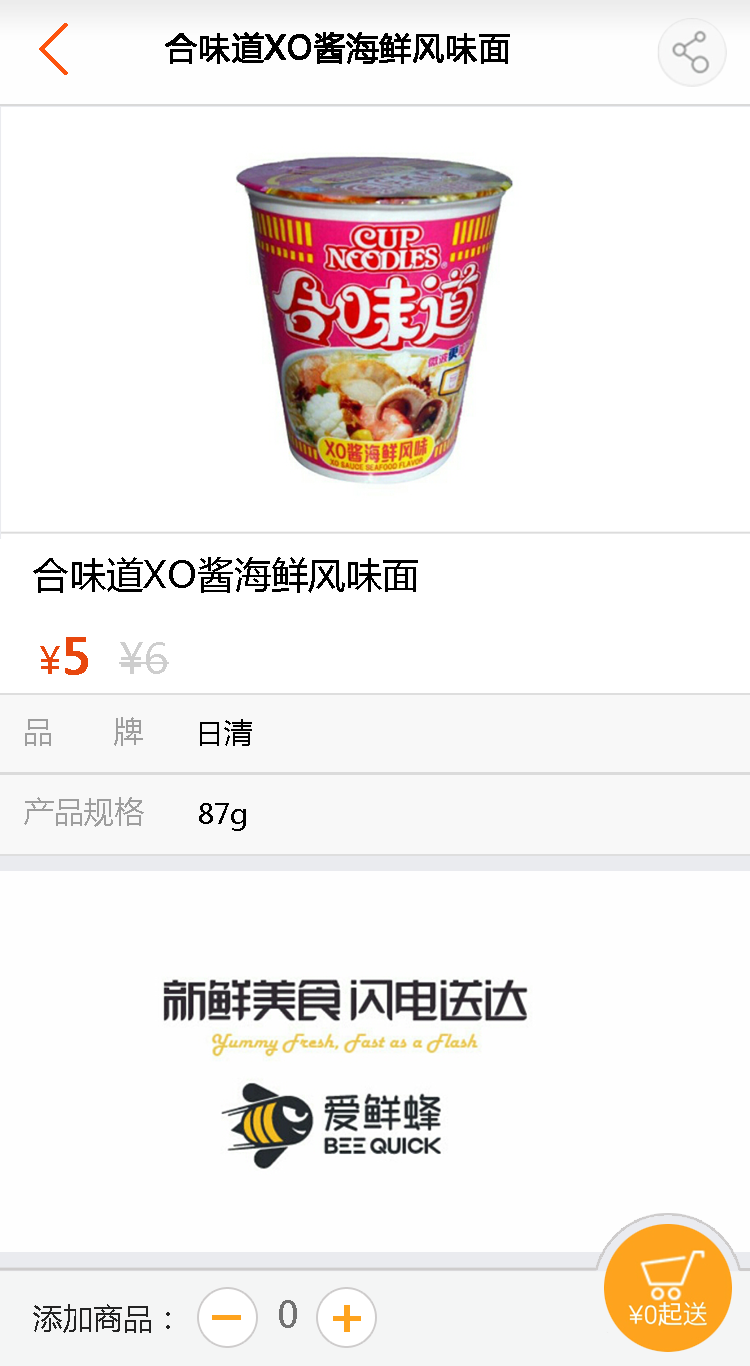
<style>
.page{position:relative;width:750px;height:1366px;background:#ffffff}
.page>*{position:absolute;margin:0}
.t1{font:72px "SimSun";color:#fd540e;font-weight:bold}
.t2{font:32px "MicrosoftYaHei";color:#000000;font-weight:bold}
.t3{font:37px "MicrosoftYaHei";color:#000000}
.t4{font:37px "MicrosoftYaHei";color:#e8470e}
.t5{font:48px "MicrosoftYaHei";color:#e8470e;font-weight:bold}
.t6{font:42px "MicrosoftYaHei";color:#cecece}
.t7{font:30px "MicrosoftYaHei";color:#9e9e9e}
.t8{font:28px "MicrosoftYaHei";color:#000000}
.t9{font:36px "MicrosoftYaHei";color:#727272}
.t10{font:30px "MicrosoftYaHei";color:#232323}
.t11{font:49.7px "MicrosoftYaHei";color:#fea31e;font-weight:bold}
</style>
<div class="page">
<p class="t1" style="left:39px;top:23px;width:29px;height:52px">&lt;</p>
<p class="t2" style="left:165px;top:32px;width:345px;height:32px">合味道XO酱海鲜风味面</p>
<p class="t3" style="left:33px;top:557px;width:385px;height:36px">合味道XO酱海鲜风味面</p>
<p class="t4" style="left:40px;top:637px;width:48px;height:38px">¥<span class="t5">5</span></p>
<p class="t6" style="left:119px;top:642px;width:50px;height:32px">¥6</p>
<p class="t7" style="left:25px;top:717px;width:118px;height:29px">品    牌</p>
<p class="t8" style="left:200px;top:719px;width:52px;height:27px">日清</p>
<p class="t7" style="left:24px;top:797px;width:120px;height:30px">产品规格</p>
<p class="t8" style="left:199px;top:803px;width:47px;height:28px">87g</p>
<p class="t9" style="left:279px;top:1300px;width:18px;height:28px">0</p>
<p class="t10" style="left:33px;top:1304px;width:137px;height:29px">添加商品：</p>
<p class="t11" style="left:333px;top:1305px;width:28px;height:27px">+</p>
</div>
